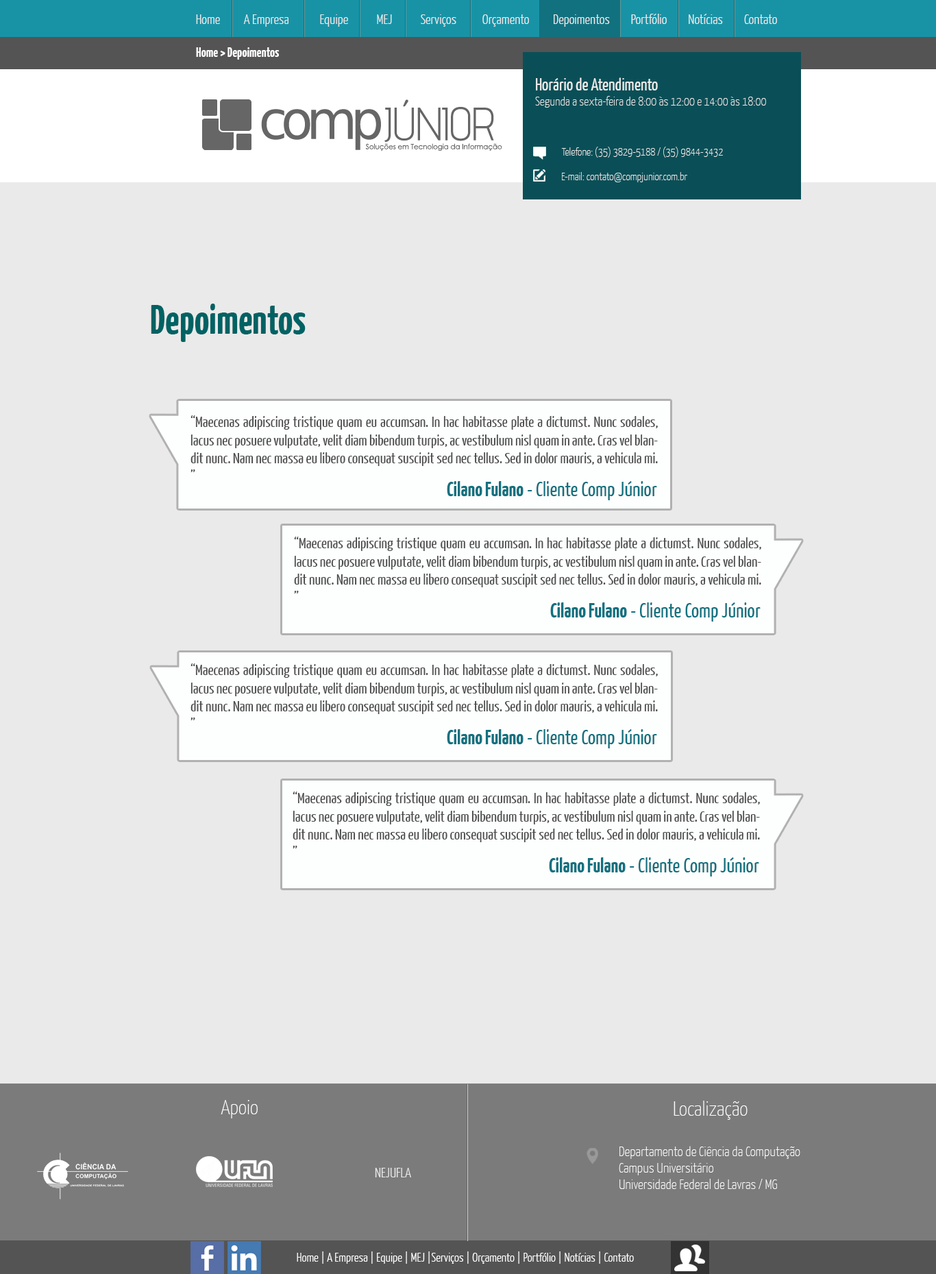
<style>
.page{position:relative;width:936px;height:1274px;background:#eaeaea}
.page>*{position:absolute;margin:0}
.t1{font:13.7px "YanoneKaffeesatz-Light";color:#eaeaea}
.t2{font:17.1px "YanoneKaffeesatz-Light";color:#999999}
.t3{font:13.7px "YanoneKaffeesatz-Bold";color:#fffdfd}
.t4{font:12.3px "YanoneKaffeesatz-ExtraLight";color:#eaeaea}
.t5{font:17.1px "YanoneKaffeesatz-Regular";color:#eaeaea}
.t6{font:11px "YanoneKaffeesatz-ExtraLight";color:#eaeaea}
.t7{font:13.7px "YanoneKaffeesatz-ExtraLight";color:#eaeaea}
.t8{font:41.1px "YanoneKaffeesatz-Bold";color:#006263}
.t9{font:15.1px "YanoneKaffeesatz-Regular";color:#4d4d4d}
.t10{font:20.6px "YanoneKaffeesatz-Regular";color:#12717f}
.t11{font:20.6px "YanoneKaffeesatz-Bold";color:#12717f}
.t12{font:20.6px "YanoneKaffeesatz-ExtraLight";color:#ffffff}
.t13{font:20.6px "YanoneKaffeesatz-ExtraLight";color:#fefefe}
.t14{font:13.7px "YanoneKaffeesatz-ExtraLight";color:#ffffff}
.t15{font:12.3px "YanoneKaffeesatz-Light";color:#ffffff}
</style>
<div class="page">
<p class="t1" style="left:196px;top:14px;width:581px;height:13px"><span class="t2"> </span>Home          A Empresa             Equipe            MEJ            Serviços           Orçamento          Depoimentos         Portfólio         Notícias         Contato</p>
<p class="t3" style="left:196px;top:47px;width:84px;height:13px">Home &gt; Depoimentos</p>
<p class="t4" style="left:535px;top:77px;width:231px;height:31px"><span class="t5">Horário de Atendimento<br></span>Segunda a sexta-feira de 8:00 às 12:00 e 14:00 às 18:00</p>
<p class="t6" style="left:561px;top:147px;width:162px;height:11px"><span class="t7"><br></span>Telefone: (35) 3829-5188 / (35) 9844-3432</p>
<p class="t6" style="left:562px;top:172px;width:125px;height:10px"><span class="t7"><br></span>E-mail: contato@compjunior.com.br</p>
<p class="t8" style="left:151px;top:304px;width:155px;height:38px">Depoimentos</p>
<p class="t9" style="left:191px;top:415px;width:467px;height:57px;text-align:justify">“Maecenas adipiscing tristique quam eu accumsan. In hac habitasse plate a dictumst. Nunc sodales, lacus nec posuere vulputate, velit diam bibendum turpis, ac vestibulum nisl quam in ante. Cras vel blandit nunc. Nam nec massa eu libero consequat suscipit sed nec tellus. Sed in dolor mauris, a vehicula mi. ”</p>
<p class="t10" style="left:447px;top:481px;width:210px;height:19px"><span class="t11">Cilano Fulano</span> - Cliente Comp Júnior</p>
<p class="t9" style="left:294px;top:537px;width:467px;height:56px;text-align:justify">“Maecenas adipiscing tristique quam eu accumsan. In hac habitasse plate a dictumst. Nunc sodales, lacus nec posuere vulputate, velit diam bibendum turpis, ac vestibulum nisl quam in ante. Cras vel blandit nunc. Nam nec massa eu libero consequat suscipit sed nec tellus. Sed in dolor mauris, a vehicula mi. ”</p>
<p class="t10" style="left:550px;top:602px;width:211px;height:20px"><span class="t11">Cilano Fulano</span> - Cliente Comp Júnior</p>
<p class="t9" style="left:191px;top:663px;width:467px;height:57px;text-align:justify">“Maecenas adipiscing tristique quam eu accumsan. In hac habitasse plate a dictumst. Nunc sodales, lacus nec posuere vulputate, velit diam bibendum turpis, ac vestibulum nisl quam in ante. Cras vel blandit nunc. Nam nec massa eu libero consequat suscipit sed nec tellus. Sed in dolor mauris, a vehicula mi. ”</p>
<p class="t10" style="left:447px;top:729px;width:210px;height:19px"><span class="t11">Cilano Fulano</span> - Cliente Comp Júnior</p>
<p class="t9" style="left:293px;top:791px;width:467px;height:57px;text-align:justify">“Maecenas adipiscing tristique quam eu accumsan. In hac habitasse plate a dictumst. Nunc sodales, lacus nec posuere vulputate, velit diam bibendum turpis, ac vestibulum nisl quam in ante. Cras vel blandit nunc. Nam nec massa eu libero consequat suscipit sed nec tellus. Sed in dolor mauris, a vehicula mi. ”</p>
<p class="t10" style="left:549px;top:857px;width:210px;height:19px"><span class="t11">Cilano Fulano</span> - Cliente Comp Júnior</p>
<p class="t12" style="left:221px;top:1100px;width:37px;height:18px">Apoio</p>
<p class="t13" style="left:674px;top:1101px;width:74px;height:19px">Localização</p>
<p class="t14" style="left:619px;top:1146px;width:181px;height:43px">Departamento de Ciência da Computação<br>Campus Universitário<br>Universidade Federal de Lavras / MG</p>
<p class="t1" style="left:375px;top:1168px;width:36px;height:9px">NEJUFLA</p>
<p class="t15" style="left:297px;top:1251px;width:337px;height:13px"><span class="t2"> </span>Home | A Empresa | Equipe | MEJ |Serviços | Orçamento | Portfólio | Notícias | Contato</p>
</div>
